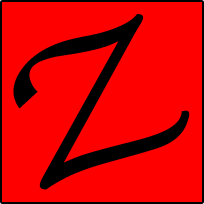
<style>
.page{position:relative;width:204px;height:204px;background:#ff0000}
.page>*{position:absolute;margin:0}
.t1{font:193.5px "Apple-Chancery";color:#000000;scale:1.6 1}
</style>
<div class="page">
<p class="t1" style="left:13px;top:14px;width:177px;height:176px;rotate:-20deg">Z</p>
</div>
